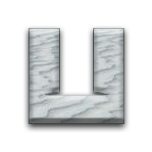
<style>
.page{position:relative;width:152px;height:152px;background:#ffffff}
.page>*{position:absolute;margin:0}
.t1{font:150px "BananaBrick"}
</style>
<div class="page">
<p class="t1" style="left:28px;top:28px;width:97px;height:96px">U</p>
</div>
